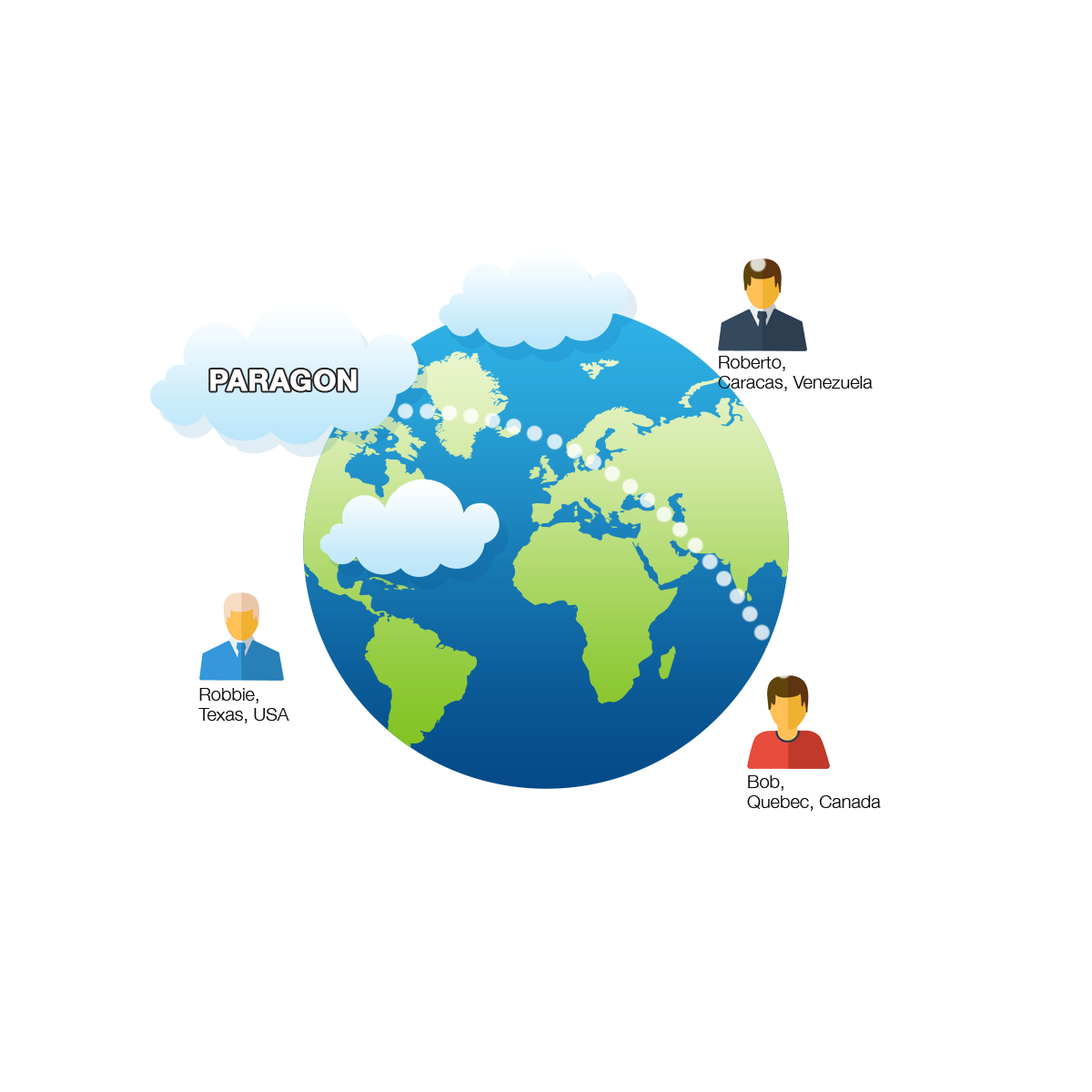
<style>
.page{position:relative;width:1092px;height:1092px;background:#ffffff}
.page>*{position:absolute;margin:0}
.t1{font:18.2px/20.1px "HelveticaNeue-Light";color:#0b0b0b}
.t2{font:29.1px "HelveticaNeue-Bold";color:#ffffff;font-weight:bold}
.t3{font:18.2px/20px "HelveticaNeue-Light";color:#0b0b0b}
</style>
<div class="page">
<p class="t1" style="left:718px;top:356px;width:155px;height:35px">Roberto,<br>Caracas, Venezuela</p>
<p class="t2" style="left:210px;top:369px;width:147px;height:22px">PARAGON</p>
<p class="t3" style="left:198px;top:688px;width:91px;height:35px">Robbie,<br>Texas, USA</p>
<p class="t1" style="left:747px;top:775px;width:134px;height:36px">Bob,<br>Quebec, Canada</p>
</div>
